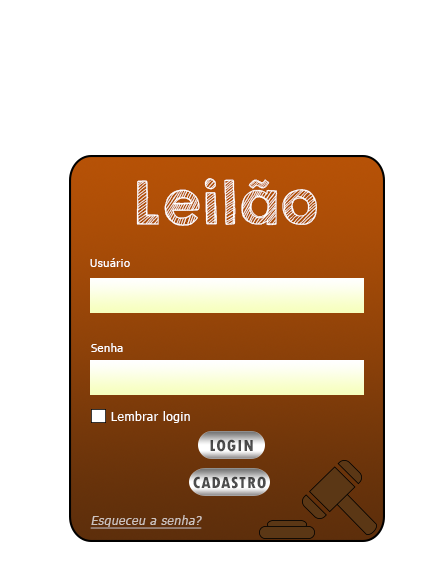
<style>
.page{position:relative;width:434px;height:578px;background:#ffffff}
.page>*{position:absolute;margin:0}
.t1{font:54.1px "KGSecondChancesSketch";letter-spacing:0.05em;color:#ffffff}
.t2{font:11px "Tahoma";letter-spacing:0.05em;color:#ffffff}
.t3{font:11.7px "Tahoma";letter-spacing:0.05em;color:#ffffff}
.t4{font:17px "TwCenMT-CondensedExtraBold";letter-spacing:0.05em;color:#4e4e4e}
.t5{font:11.7px "Tahoma";letter-spacing:0.05em;color:#cec4bf;font-style:italic;text-decoration:underline}
</style>
<div class="page">
<p class="t1" style="left:136px;top:178px;width:181px;height:48px">Leilão</p>
<p class="t2" style="left:90px;top:258px;width:40px;height:9px">Usuário</p>
<p class="t2" style="left:91px;top:343px;width:32px;height:9px">Senha</p>
<p class="t3" style="left:111px;top:411px;width:79px;height:12px">Lembrar login</p>
<p class="t4" style="left:210px;top:439px;width:43px;height:13px">LOGIN</p>
<p class="t4" style="left:193px;top:476px;width:73px;height:13px">CADASTRO</p>
<p class="t5" style="left:90px;top:515px;width:112px;height:14px">Esqueceu a senha?</p>
</div>
